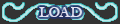
<style>
.page{position:relative;width:120px;height:24px;background:#333333}
.page>*{position:absolute;margin:0}
.t1{font:16px "BellMT";color:#e0e0f0}
</style>
<div class="page">
<p class="t1" style="left:39px;top:7px;width:43px;height:10px">LOAD</p>
</div>
